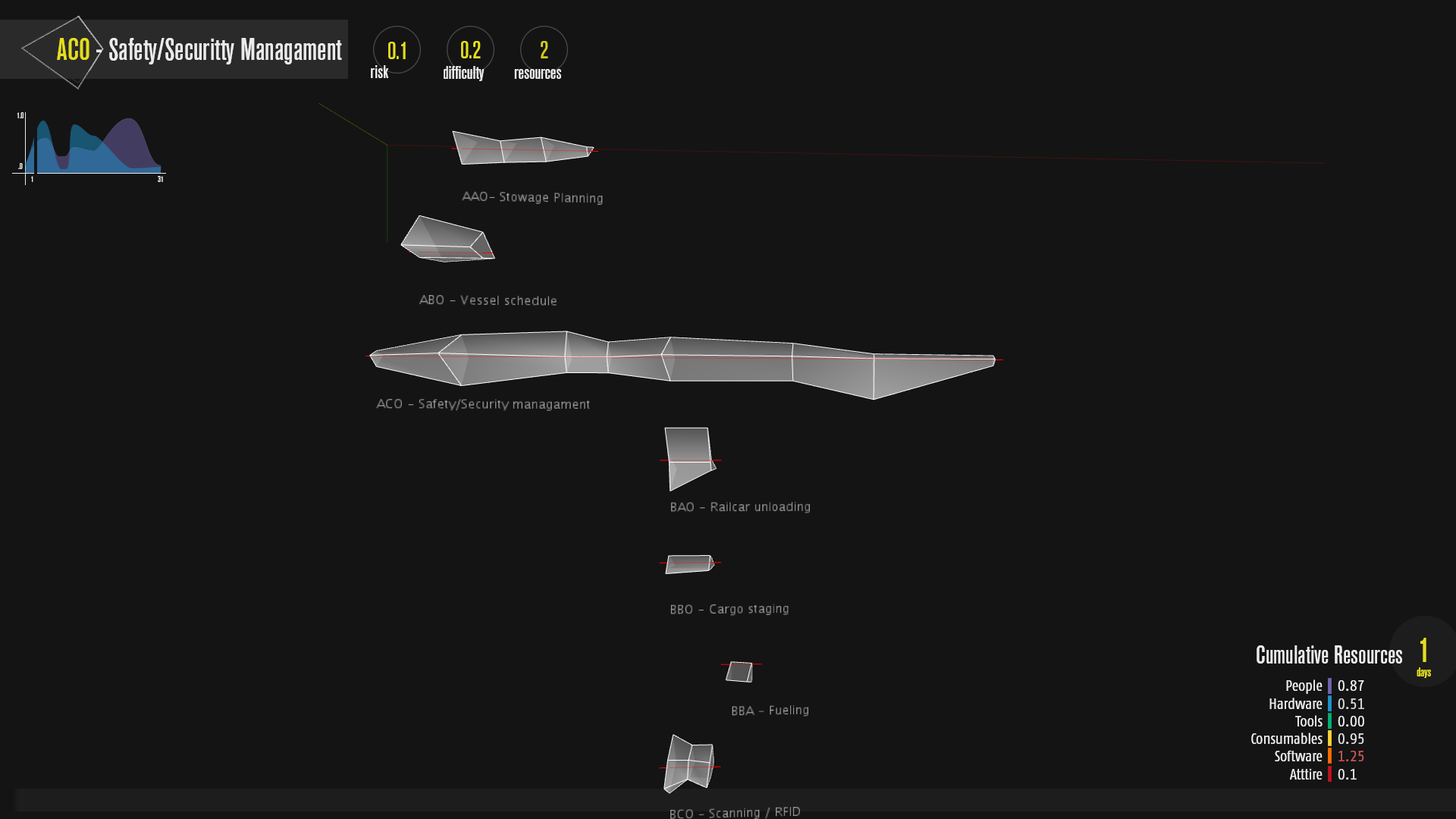
<style>
.page{position:relative;width:1456px;height:819px;background:#141414}
.page>*{position:absolute;margin:0}
.t1{font:30.3px "AkzidenzGroteskBQ-MdCndAlt";color:#ebebeb}
.t2{font:30.3px "AkzidenzGroteskBQ-MdCndAlt";color:#e5de1b}
.t3{font:24.3px "AkzidenzGroteskBQ-MdCndAlt";color:#e5de1b}
.t4{font:24.3px "AkzidenzGroteskBQ-MdCndAlt";color:#d0ca1a}
.t5{font:18.2px "AkzidenzGroteskBQ-MdCndAlt";color:#ebebeb}
.t6{font:8.1px "AkzidenzGroteskBQ-MdCndAlt";color:#ebebeb}
.t7{font:34.1px "AkzidenzGroteskBQ-MdCndAlt";color:#e5de1b}
.t8{font:25.3px "AkzidenzGroteskBQ-MdCndAlt";color:#ebebeb}
.t9{font:12.1px "AkzidenzGroteskBQ-MdCndAlt";color:#e5de1b}
.t10{font:15.2px "FagoCoTf";color:#ebebeb}
.t11{font:15.2px "FagoCoTf";color:#d7d7d7}
.t12{font:15.2px "FagoCoTf";color:#dfdfdf}
.t13{font:15.2px "FagoCoTf";color:#c65151}
.t14{font:15.2px "FagoCoTf";color:#e4e4e4}
</style>
<div class="page">
<p class="t1" style="left:57px;top:38px;width:285px;height:26px"><span class="t2">ACO </span>- Safety/Securitty Managament</p>
<p class="t3" style="left:388px;top:42px;width:18px;height:17px">0.1</p>
<p class="t3" style="left:461px;top:41px;width:20px;height:17px">0.2</p>
<p class="t4" style="left:541px;top:41px;width:7px;height:17px">2</p>
<p class="t5" style="left:371px;top:65px;width:18px;height:13px">risk</p>
<p class="t5" style="left:444px;top:66px;width:41px;height:15px">difficulty</p>
<p class="t5" style="left:514px;top:69px;width:47px;height:10px">resources</p>
<p class="t6" style="left:17px;top:112px;width:7px;height:6px">1.0</p>
<p class="t6" style="left:18px;top:163px;width:5px;height:6px">.0</p>
<p class="t6" style="left:31px;top:176px;width:2px;height:6px">1</p>
<p class="t6" style="left:158px;top:176px;width:5px;height:6px">31</p>
<p class="t7" style="left:1420px;top:638px;width:6px;height:24px">1</p>
<p class="t8" style="left:1257px;top:645px;width:145px;height:19px">Cumulative Resources</p>
<p class="t9" style="left:1417px;top:667px;width:14px;height:11px">days</p>
<p class="t10" style="left:1286px;top:679px;width:37px;height:15px">People</p>
<p class="t10" style="left:1338px;top:680px;width:26px;height:11px">0.87</p>
<p class="t10" style="left:1269px;top:698px;width:54px;height:11px">Hardware</p>
<p class="t11" style="left:1338px;top:698px;width:26px;height:11px">0.51</p>
<p class="t10" style="left:1295px;top:715px;width:28px;height:11px">Tools</p>
<p class="t10" style="left:1338px;top:716px;width:26px;height:10px">0.00</p>
<p class="t10" style="left:1251px;top:733px;width:72px;height:11px">Consumables</p>
<p class="t12" style="left:1338px;top:733px;width:26px;height:11px">0.95</p>
<p class="t10" style="left:1275px;top:750px;width:48px;height:11px">Software</p>
<p class="t13" style="left:1338px;top:751px;width:26px;height:10px">1.25</p>
<p class="t10" style="left:1289px;top:768px;width:34px;height:12px">Atttire</p>
<p class="t14" style="left:1338px;top:769px;width:19px;height:11px">0.1</p>
</div>
